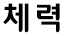
<style>
.page{position:relative;width:64px;height:36px;background:#ffffff}
.page>*{position:absolute;margin:0}
.t1{font:32px "12LotteMartDreamBold";letter-spacing:0.1em;color:#000000;text-transform:uppercase}
</style>
<div class="page">
<p class="t1" style="left:3px;top:3px;width:57px;height:30px">체력</p>
</div>
